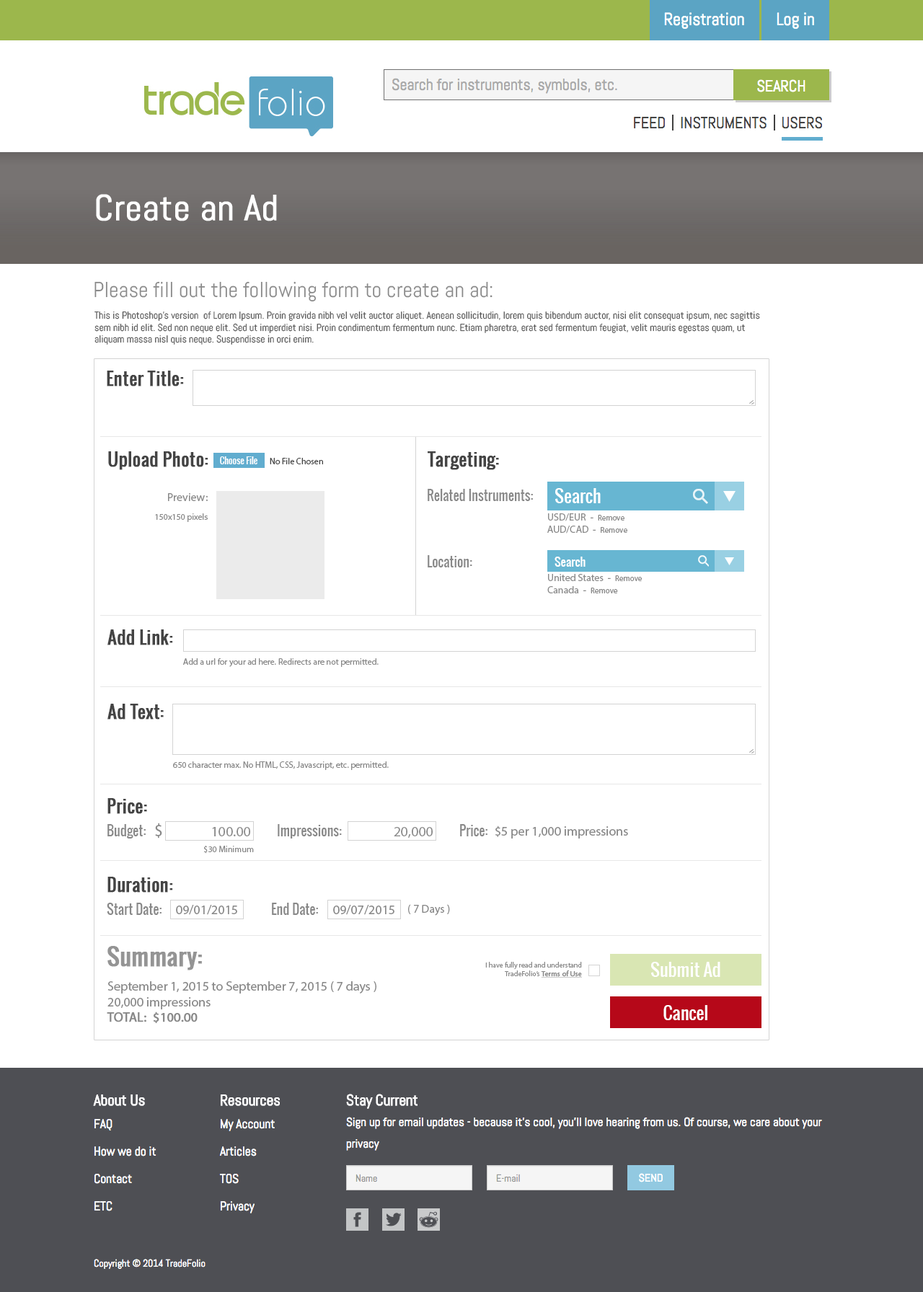
<style>
.page{position:relative;width:923px;height:1292px;background:#ffffff}
.page>*{position:absolute;margin:0}
.t1{font:36.1px "Abel-Regular";color:#ffffff;font-weight:bold}
.t2{font:21.6px "Abel-Regular";color:#898989}
.t3{font:10.1px "Abel-Regular";color:#515151}
.t4{font:17.3px "Oswald-Regular";color:#444444;font-weight:bold}
.t5{font:8.7px "Oswald-Regular";color:#ffffff}
.t6{font:8.7px "MyriadPro-Regular";color:#444444}
.t7{font:11.5px "MyriadPro-Regular";color:#898989}
.t8{font:13px "Oswald-Regular";color:#898989}
.t9{font:17.3px "Oswald-Regular";color:#ffffff}
.t10{font:8.7px "MyriadPro-Regular";color:#898989}
.t11{font:10.1px "MyriadPro-Regular";color:#898989}
.t12{font:7.9px "MyriadPro-Regular";color:#898989}
.t13{font:11.5px "Oswald-Regular";color:#ffffff}
.t14{font:17.3px "MyriadPro-Regular";color:#898989}
.t15{font:14.4px "MyriadPro-Regular";color:#898989}
.t16{font:13px "MyriadPro-Regular";color:#898989}
.t17{font:23.1px "Oswald-Regular";color:#939494;font-weight:bold}
.t18{font:7.2px "MyriadPro-Regular";color:#898989}
.t19{font:7.2px "MyriadPro-Regular";color:#898989;font-weight:bold;text-decoration:underline}
.t20{font:13px "MyriadPro-Regular";color:#898989;text-transform:uppercase;font-weight:bold}
</style>
<div class="page">
<p class="t1" style="left:96px;top:194px;width:181px;height:27px">Create an Ad</p>
<p class="t2" style="left:94px;top:281px;width:398px;height:21px">Please fill out the following form to create an ad:</p>
<p class="t3" style="left:94px;top:311px;width:666px;height:34px">This is Photoshop's version  of Lorem Ipsum. Proin gravida nibh vel velit auctor aliquet. Aenean sollicitudin, lorem quis bibendum auctor, nisi elit consequat ipsum, nec sagittis sem nibh id elit. Sed non neque elit. Sed ut imperdiet nisi. Proin condimentum fermentum nunc. Etiam pharetra, erat sed fermentum feugiat, velit mauris egestas quam, ut aliquam massa nisl quis neque. Suspendisse in orci enim.</p>
<p class="t4" style="left:107px;top:371px;width:77px;height:15px">Enter Title:</p>
<p class="t4" style="left:108px;top:451px;width:100px;height:19px">Upload Photo:</p>
<p class="t5" style="left:220px;top:456px;width:37px;height:8px">Choose File</p>
<p class="t6" style="left:270px;top:458px;width:53px;height:6px">No File Chosen</p>
<p class="t4" style="left:428px;top:451px;width:71px;height:19px">Targeting:</p>
<p class="t7" style="left:168px;top:493px;width:40px;height:8px">Preview:</p>
<p class="t8" style="left:428px;top:489px;width:105px;height:12px">Related Instruments:</p>
<p class="t9" style="left:555px;top:488px;width:46px;height:15px">Search</p>
<p class="t10" style="left:155px;top:513px;width:53px;height:9px">150x150 pixels</p>
<p class="t11" style="left:547px;top:513px;width:80px;height:21px">USD/EUR  -  <span class="t12">Remove<br></span>AUD/CAD  -  <span class="t12">Remove</span></p>
<p class="t8" style="left:428px;top:555px;width:44px;height:12px">Location:</p>
<p class="t13" style="left:554px;top:557px;width:31px;height:10px">Search</p>
<p class="t11" style="left:547px;top:574px;width:95px;height:19px">United States  -  <span class="t12">Remove<br></span>Canada  -  <span class="t12">Remove</span></p>
<p class="t4" style="left:107px;top:629px;width:66px;height:16px">Add Link:</p>
<p class="t10" style="left:183px;top:658px;width:196px;height:9px">Add a url for your ad here. Redirects are not permitted.</p>
<p class="t4" style="left:107px;top:704px;width:57px;height:16px">Ad Text:</p>
<p class="t10" style="left:173px;top:761px;width:216px;height:9px">650 character max. No HTML, CSS, Javascript, etc. permitted.</p>
<p class="t4" style="left:107px;top:798px;width:40px;height:16px">Price:</p>
<p class="t8" style="left:107px;top:824px;width:39px;height:15px">Budget:</p>
<p class="t14" style="left:155px;top:823px;width:7px;height:16px">$</p>
<p class="t15" style="left:212px;top:827px;width:38px;height:9px">100.00</p>
<p class="t8" style="left:278px;top:824px;width:64px;height:15px">Impressions:</p>
<p class="t15" style="left:394px;top:827px;width:39px;height:11px">20,000</p>
<p class="t8" style="left:460px;top:824px;width:27px;height:12px">Price:</p>
<p class="t16" style="left:495px;top:826px;width:133px;height:13px">$5 per 1,000 impressions</p>
<p class="t10" style="left:204px;top:845px;width:50px;height:9px">$30 Minimum</p>
<p class="t4" style="left:107px;top:877px;width:66px;height:16px">Duration:</p>
<p class="t8" style="left:107px;top:903px;width:55px;height:12px">Start Date:</p>
<p class="t16" style="left:176px;top:905px;width:61px;height:10px">09/01/2015</p>
<p class="t8" style="left:272px;top:903px;width:46px;height:12px">End Date:</p>
<p class="t16" style="left:333px;top:905px;width:61px;height:10px">09/07/2015</p>
<p class="t7" style="left:408px;top:904px;width:42px;height:12px">( 7 Days )</p>
<p class="t17" style="left:107px;top:946px;width:95px;height:24px">Summary:</p>
<p class="t18" style="left:485px;top:962px;width:97px;height:16px;text-align:right">I have fully read and understand<br>TradeFolio’s <span class="t19">Terms of Use</span></p>
<p class="t9" style="left:651px;top:962px;width:69px;height:15px">Submit Ad</p>
<p class="t16" style="left:107px;top:981px;width:269px;height:42px">September 1, 2015 to September 7, 2015 ( 7 days )<br>20,000 impressions<br><span class="t20">Total:  $100.00</span></p>
<p class="t9" style="left:663px;top:1005px;width:44px;height:15px">Cancel</p>
</div>
